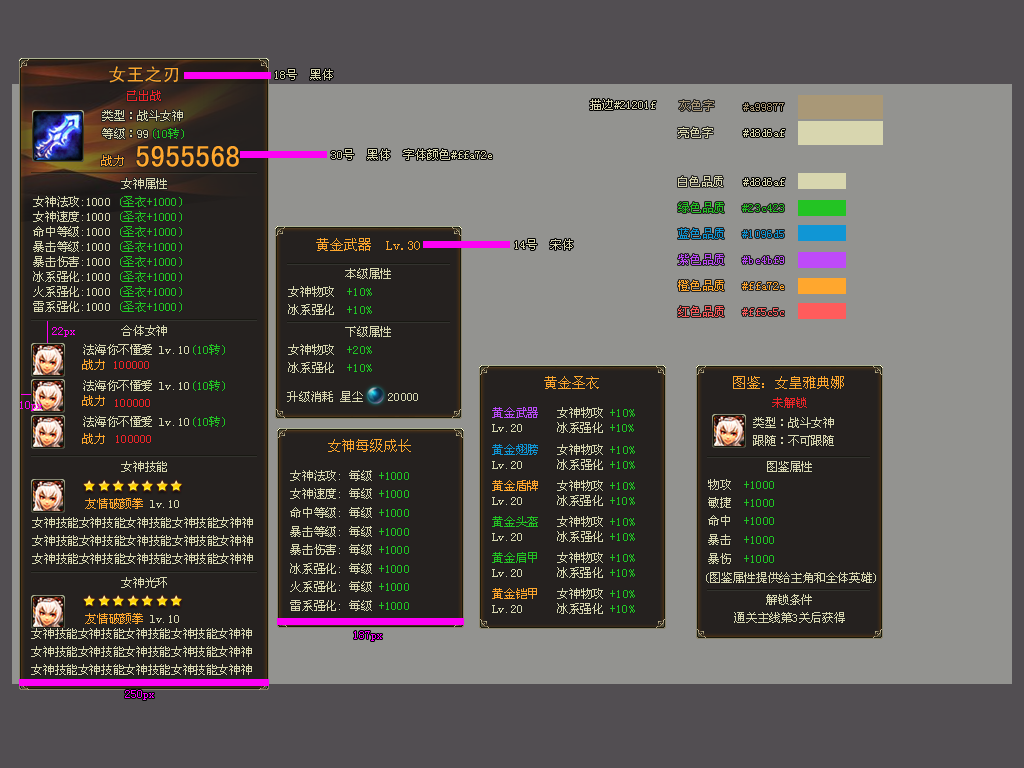
<style>
.page{position:relative;width:1024px;height:768px;background:#939390}
.page>*{position:absolute;margin:0}
.t1{font:18px "SimHei";color:#ffa72e}
.t2{font:12px "SimSun";color:#d8d6af}
.t3{font:12px "SimSun";color:#f02528}
.t4{font:12px "SimSun";color:#a99877}
.t5{font:12px "SimSun";color:#23c423}
.t6{font:30px "SimHei";color:#ffa72e}
.t7{font:12px "SimSun";color:#ffa72e}
.t8{font:12px/15px "SimSun";color:#d8d6af}
.t9{font:12px/15px "SimSun";color:#23c423}
.t10{font:12px "SimSun";color:#1096d5}
.t11{font:14px "SimSun";color:#ffa72e}
.t12{font:12px "SimSun";color:#be4bf9}
.t13{font:12px "SimSun";color:#ff5c5c}
.t14{font:12px "SimSun";color:#ff00f6}
.t15{font:12px/18.6px "SimSun";color:#d8d6af}
.t16{font:12px/18.6px "SimSun";color:#23c423}
.t17{font:12px/18px "SimSun";color:#d8d6af}
.t18{font:12px "SimSun";color:#fc00ff}
</style>
<div class="page">
<p class="t1" style="left:109px;top:66px;width:70px;height:17px">女王之刃</p>
<p class="t2" style="left:275px;top:69px;width:58px;height:11px">18号  黑体</p>
<p class="t3" style="left:127px;top:90px;width:34px;height:11px">已出战</p>
<p class="t2" style="left:590px;top:99px;width:66px;height:11px">描边#21201f</p>
<p class="t4" style="left:679px;top:100px;width:35px;height:11px">灰色字</p>
<p class="t2" style="left:102px;top:110px;width:81px;height:11px">类型：战斗女神</p>
<p class="t4" style="left:743px;top:103px;width:41px;height:8px">#a99877</p>
<p class="t2" style="left:102px;top:128px;width:82px;height:11px">等级：99<span class="t5">(10转)</span></p>
<p class="t2" style="left:678px;top:127px;width:35px;height:11px">亮色字</p>
<p class="t2" style="left:743px;top:129px;width:42px;height:8px">#d8d6af</p>
<p class="t6" style="left:136px;top:146px;width:103px;height:21px">5955568</p>
<p class="t2" style="left:331px;top:149px;width:161px;height:11px">30号  黑体  字体颜色#ffa72e</p>
<p class="t7" style="left:101px;top:155px;width:23px;height:11px">战力</p>
<p class="t2" style="left:121px;top:178px;width:46px;height:11px">女神属性</p>
<p class="t2" style="left:678px;top:176px;width:45px;height:11px">白色品质</p>
<p class="t2" style="left:743px;top:178px;width:42px;height:8px">#d8d6af</p>
<p class="t8" style="left:33px;top:196px;width:149px;height:116px">女神法攻:1000 <span class="t9">(圣衣+1000)<br></span>女神速度:1000 <span class="t9">(圣衣+1000)<br></span>命中等级:1000 <span class="t9">(圣衣+1000)<br></span>暴击等级:1000 <span class="t9">(圣衣+1000)<br></span>暴击伤害:1000 <span class="t9">(圣衣+1000)<br></span>冰系强化:1000 <span class="t9">(圣衣+1000)<br></span>火系强化:1000 <span class="t9">(圣衣+1000)<br></span>雷系强化:1000 <span class="t9">(圣衣+1000)</span></p>
<p class="t5" style="left:678px;top:202px;width:46px;height:11px">绿色品质</p>
<p class="t5" style="left:742px;top:204px;width:42px;height:8px">#23c423</p>
<p class="t10" style="left:678px;top:228px;width:46px;height:11px">蓝色品质</p>
<p class="t10" style="left:742px;top:230px;width:42px;height:8px">#1096d5</p>
<p class="t11" style="left:316px;top:238px;width:104px;height:13px">黄金武器  Lv.30</p>
<p class="t2" style="left:515px;top:239px;width:58px;height:11px">14号  宋体</p>
<p class="t12" style="left:678px;top:254px;width:46px;height:11px">紫色品质</p>
<p class="t12" style="left:742px;top:256px;width:42px;height:8px">#be4bf9</p>
<p class="t2" style="left:345px;top:268px;width:46px;height:11px">本级属性</p>
<p class="t7" style="left:678px;top:280px;width:46px;height:11px">橙色品质</p>
<p class="t2" style="left:288px;top:286px;width:84px;height:11px">女神物攻  <span class="t5">+10%</span></p>
<p class="t7" style="left:742px;top:282px;width:42px;height:8px">#ffa72e</p>
<p class="t2" style="left:288px;top:304px;width:84px;height:11px">冰系强化  <span class="t5">+10%</span></p>
<p class="t13" style="left:678px;top:306px;width:46px;height:11px">红色品质</p>
<p class="t13" style="left:742px;top:308px;width:42px;height:8px">#ff5c5c</p>
<p class="t14" style="left:52px;top:327px;width:23px;height:10px">22px</p>
<p class="t2" style="left:121px;top:325px;width:46px;height:11px">合体女神</p>
<p class="t2" style="left:345px;top:326px;width:46px;height:11px">下级属性</p>
<p class="t2" style="left:83px;top:344px;width:142px;height:11px">法海你不懂爱 lv.10<span class="t5">(10转)</span></p>
<p class="t15" style="left:288px;top:344px;width:84px;height:29px">女神物攻  <span class="t16">+20%<br></span>冰系强化  <span class="t16">+10%</span></p>
<p class="t7" style="left:82px;top:359px;width:23px;height:11px">战力</p>
<p class="t3" style="left:114px;top:361px;width:35px;height:8px">100000</p>
<p class="t11" style="left:544px;top:376px;width:55px;height:13px">黄金圣衣</p>
<p class="t11" style="left:733px;top:376px;width:111px;height:13px">图鉴：女皇雅典娜</p>
<p class="t2" style="left:83px;top:380px;width:142px;height:11px">法海你不懂爱 lv.10<span class="t5">(10转)</span></p>
<p class="t14" style="left:20px;top:401px;width:22px;height:10px">10px</p>
<p class="t7" style="left:82px;top:395px;width:23px;height:11px">战力</p>
<p class="t3" style="left:115px;top:399px;width:35px;height:8px">100000</p>
<p class="t2" style="left:287px;top:391px;width:131px;height:11px">升级消耗 星尘    20000</p>
<p class="t3" style="left:772px;top:397px;width:35px;height:11px">未解锁</p>
<p class="t12" style="left:492px;top:407px;width:143px;height:11px">黄金武器<span class="t2">   女神物攻 </span><span class="t5">+10%</span></p>
<p class="t2" style="left:83px;top:416px;width:142px;height:11px">法海你不懂爱 lv.10<span class="t5">(10转)</span></p>
<p class="t2" style="left:492px;top:422px;width:142px;height:11px">Lv.20     冰系强化 <span class="t5">+10%</span></p>
<p class="t2" style="left:753px;top:417px;width:81px;height:11px">类型：战斗女神</p>
<p class="t7" style="left:82px;top:433px;width:23px;height:11px">战力</p>
<p class="t3" style="left:116px;top:435px;width:35px;height:8px">100000</p>
<p class="t2" style="left:753px;top:435px;width:81px;height:11px">跟随：不可跟随</p>
<p class="t11" style="left:328px;top:439px;width:83px;height:13px">女神每级成长</p>
<p class="t10" style="left:492px;top:444px;width:143px;height:11px">黄金翅膀<span class="t2">   女神物攻 </span><span class="t5">+10%</span></p>
<p class="t2" style="left:121px;top:461px;width:46px;height:11px">女神技能</p>
<p class="t2" style="left:492px;top:459px;width:143px;height:11px">Lv.20     冰系强化 <span class="t5">+10%</span></p>
<p class="t2" style="left:767px;top:461px;width:45px;height:11px">图鉴属性</p>
<p class="t15" style="left:290px;top:470px;width:119px;height:141px">女神法攻: 每级 <span class="t16">+1000<br></span>女神速度: 每级 <span class="t16">+1000<br></span>命中等级: 每级 <span class="t16">+1000<br></span>暴击等级: 每级 <span class="t16">+1000<br></span>暴击伤害: 每级 <span class="t16">+1000<br></span>冰系强化: 每级 <span class="t16">+1000<br></span>火系强化: 每级 <span class="t16">+1000<br></span>雷系强化: 每级 <span class="t16">+1000</span></p>
<p class="t7" style="left:492px;top:480px;width:143px;height:11px">黄金盾牌<span class="t2">   女神物攻 </span><span class="t5">+10%</span></p>
<p class="t5" style="left:708px;top:479px;width:66px;height:11px"><span class="t2">物攻  </span>+1000</p>
<p class="t2" style="left:492px;top:495px;width:143px;height:11px">Lv.20     冰系强化 <span class="t5">+10%</span></p>
<p class="t16" style="left:708px;top:497px;width:66px;height:67px"><span class="t15">敏捷  </span>+1000<br><span class="t15">命中  </span>+1000<br><span class="t15">暴击  </span>+1000<br><span class="t15">暴伤  </span>+1000</p>
<p class="t7" style="left:85px;top:498px;width:94px;height:11px">友情破颜拳 <span class="t2">lv.10</span></p>
<p class="t17" style="left:32px;top:517px;width:221px;height:47px">女神技能女神技能女神技能女神技能女神神<br>女神技能女神技能女神技能女神技能女神神<br>女神技能女神技能女神技能女神技能女神神</p>
<p class="t5" style="left:492px;top:516px;width:143px;height:11px">黄金头盔<span class="t2">   女神物攻 </span>+10%</p>
<p class="t2" style="left:492px;top:531px;width:143px;height:11px">Lv.20     冰系强化 <span class="t5">+10%</span></p>
<p class="t5" style="left:492px;top:552px;width:143px;height:11px">黄金肩甲<span class="t2">   女神物攻 </span>+10%</p>
<p class="t2" style="left:492px;top:567px;width:143px;height:11px">Lv.20     冰系强化 <span class="t5">+10%</span></p>
<p class="t2" style="left:121px;top:577px;width:46px;height:11px">女神光环</p>
<p class="t2" style="left:706px;top:572px;width:170px;height:11px">(图鉴属性提供给主角和全体英雄)</p>
<p class="t7" style="left:492px;top:588px;width:143px;height:11px">黄金铠甲<span class="t2">   女神物攻 </span><span class="t5">+10%</span></p>
<p class="t2" style="left:492px;top:603px;width:143px;height:11px">Lv.20     冰系强化 <span class="t5">+10%</span></p>
<p class="t2" style="left:766px;top:594px;width:46px;height:11px">解锁条件</p>
<p class="t7" style="left:85px;top:613px;width:94px;height:11px">友情破颜拳 <span class="t2">lv.10</span></p>
<p class="t2" style="left:734px;top:612px;width:111px;height:11px">通关主线第3关后获得</p>
<p class="t17" style="left:31px;top:628px;width:221px;height:47px">女神技能女神技能女神技能女神技能女神神<br>女神技能女神技能女神技能女神技能女神神<br>女神技能女神技能女神技能女神技能女神神</p>
<p class="t18" style="left:354px;top:631px;width:28px;height:10px">187px</p>
<p class="t18" style="left:125px;top:690px;width:29px;height:10px">250px</p>
</div>
